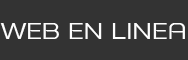
<style>
.page{position:relative;width:188px;height:60px;background:#333333}
.page>*{position:absolute;margin:0}
.t1{font:23px "Tretton-Regular";color:#fdfdfd}
</style>
<div class="page">
<p class="t1" style="left:0px;top:23px;width:185px;height:16px">WEB EN LINEA</p>
</div>
